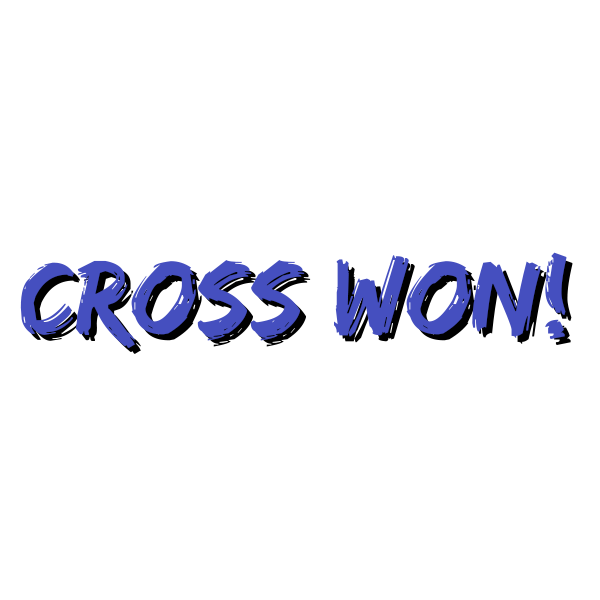
<style>
.page{position:relative;width:600px;height:600px;background:#ffffff}
.page>*{position:absolute;margin:0}
.t1{font:110px "EdoSZ";color:#454fbf}
.t2{font:110px "EdoSZ"}
</style>
<div class="page">
<p class="t1" style="left:20px;top:252px;width:547px;height:96px">cross won!</p>
<p class="t2" style="left:26px;top:258px;width:547px;height:96px">Cross won!</p>
</div>
